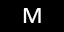
<style>
.page{position:relative;width:64px;height:32px;background:#000000}
.page>*{position:absolute;margin:0}
.t1{font:24px "Calibri";color:#feffff}
</style>
<div class="page">
<p class="t1" style="left:23px;top:8px;width:18px;height:15px">M</p>
</div>
